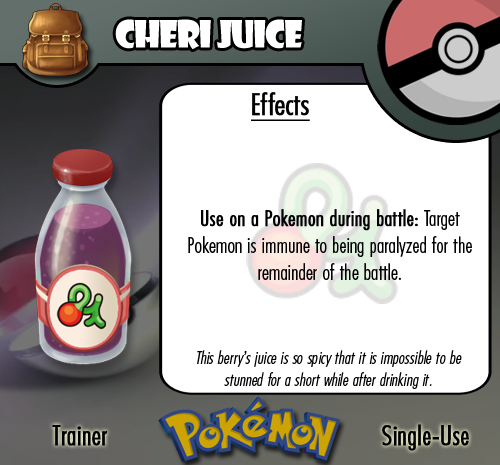
<style>
.page{position:relative;width:500px;height:465px;background:#ffffff}
.page>*{position:absolute;margin:0}
.t1{font:36.7px "ShowcardGothic-Reg";letter-spacing:-0.025em;color:#ffffff;scale:0.91 1}
.t2{font:22.2px "FuturaCondensedBQ-Light";color:#010101}
.t3{font:27.8px "FuturaCondensedBQ-Light";color:#010101;font-weight:bold}
.t4{font:30.6px "FuturaCondensedBQ-Light";color:#010101;font-weight:bold;text-decoration:underline}
.t5{font:22.2px "FuturaCondensedBQ-Light";color:#010101;font-weight:bold}
.t6{font:18.1px "FuturaCondensedBQ-Light";color:#010101;font-style:italic}
</style>
<div class="page">
<p class="t1" style="left:115px;top:19px;width:187px;height:31px">Cheri Juice</p>
<p class="t2" style="left:188px;top:92px;width:284px;height:188px"><span class="t3">  </span><span class="t4">Effects<br><br><br><br><br><br></span><span class="t5">Use on a Pokemon during battle: </span>Target Pokemon is immune to being paralyzed for the remainder of the battle.</p>
<p class="t6" style="left:197px;top:350px;width:265px;height:39px;text-align:center">This berry’s juice is so spicy that it is impossible to be stunned for a short while after drinking it.</p>
<p class="t3" style="left:52px;top:425px;width:55px;height:21px">Trainer</p>
<p class="t3" style="left:382px;top:424px;width:87px;height:27px">Single-Use</p>
</div>
